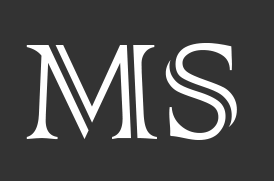
<style>
.page{position:relative;width:274px;height:181px;background:#333333}
.page>*{position:absolute;margin:0}
.t1{font:179.7px "ColonnaMT";color:#ffffff}
</style>
<div class="page">
<p class="t1" style="left:26px;top:43px;width:211px;height:97px">MS</p>
</div>
